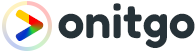
<style>
.page{position:relative;width:196px;height:52px;background:#ffffff}
.page>*{position:absolute;margin:0}
.t1{font:48px "Fredoka-SemiBold";color:#263238}
.t2{font:48px "Fredoka-Bold"}
</style>
<div class="page">
<p class="t1" style="left:58px;top:3px;width:137px;height:45px">onitgo</p>
<p class="t2" style="left:15px;top:9px;width:29px;height:32px">&gt;</p>
</div>
